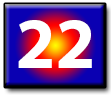
<style>
.page{position:relative;width:111px;height:96px;background:#ffffff}
.page>*{position:absolute;margin:0}
.t1{font:72px "MyriadPro-Bold";color:#ffffff}
</style>
<div class="page">
<p class="t1" style="left:18px;top:20px;width:74px;height:48px">22</p>
</div>
